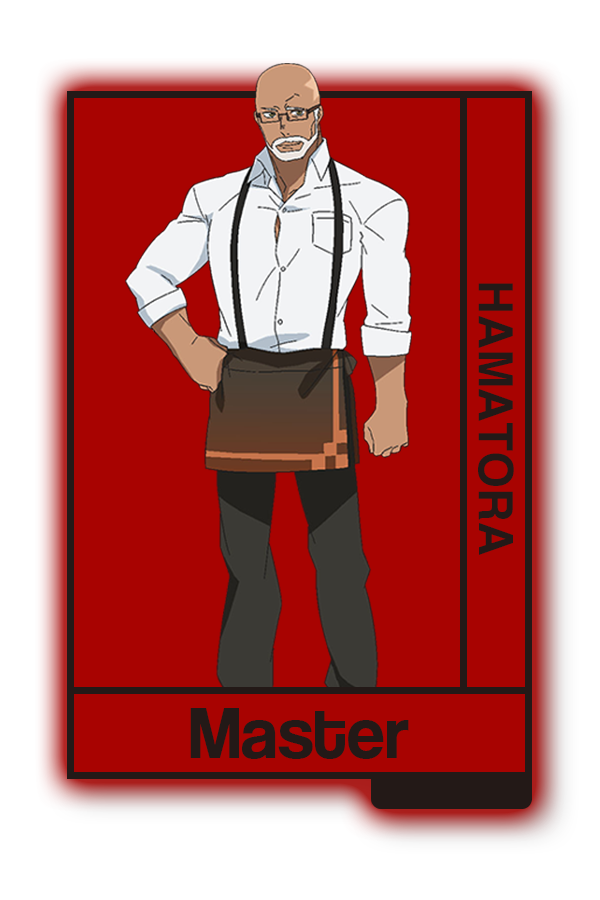
<style>
.page{position:relative;width:600px;height:900px;background:#a80301}
.page>*{position:absolute;margin:0}
.t1{font:47.4px "Helvetica-Bold";color:#231917}
.t2{font:75px "CoolveticaRg-Regular";color:#231917}
</style>
<div class="page">
<p class="t1" style="left:478px;top:283px;width:36px;height:272px;rotate:90deg">HAMATORA</p>
<p class="t2" style="left:190px;top:708px;width:219px;height:51px">Master</p>
</div>
